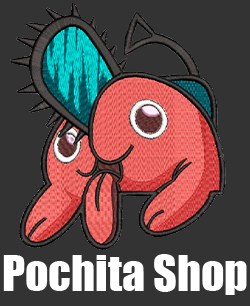
<style>
.page{position:relative;width:250px;height:306px;background:#333333}
.page>*{position:absolute;margin:0}
.t1{font:46px "Impact";color:#ffffff}
</style>
<div class="page">
<p class="t1" style="left:3px;top:254px;width:244px;height:41px">Pochita Shop</p>
</div>
